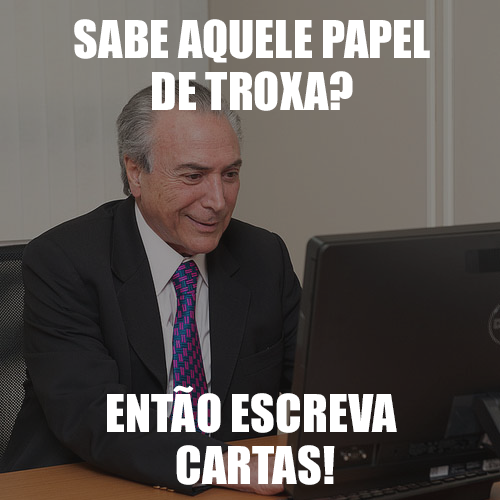
<style>
.page{position:relative;width:500px;height:500px}
.page>*{position:absolute;margin:0}
.t1{font:48px/16px "Impact";color:#ffffff;text-transform:uppercase}
</style>
<div class="page">
<p class="t1" style="left:74px;top:19px;width:356px;height:92px;text-align:center">SABE AQUELE PAPEL<br><br>DE TROXA?</p>
<p class="t1" style="left:107px;top:385px;width:290px;height:100px;text-align:center">ENTÃO ESCREVA <br><br>CARTAS!</p>
</div>
